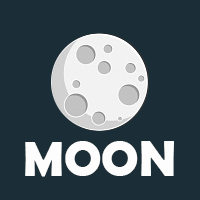
<style>
.page{position:relative;width:200px;height:200px;background:#1b2d36}
.page>*{position:absolute;margin:0}
.t1{font:50px "BerlinSansFBDemi-Bold";color:#fdfdfd}
</style>
<div class="page">
<p class="t1" style="left:25px;top:141px;width:149px;height:36px">MOON</p>
</div>
